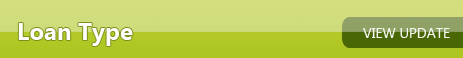
<style>
.page{position:relative;width:463px;height:58px}
.page>*{position:absolute;margin:0}
.t1{font:24px "SegoeUI-Bold";color:#fefefe}
.t2{font:14px "SegoeUI";color:#f6f7f1}
</style>
<div class="page">
<p class="t1" style="left:18px;top:23px;width:115px;height:23px">Loan Type</p>
<p class="t2" style="left:363px;top:28px;width:87px;height:10px">VIEW UPDATE</p>
</div>
